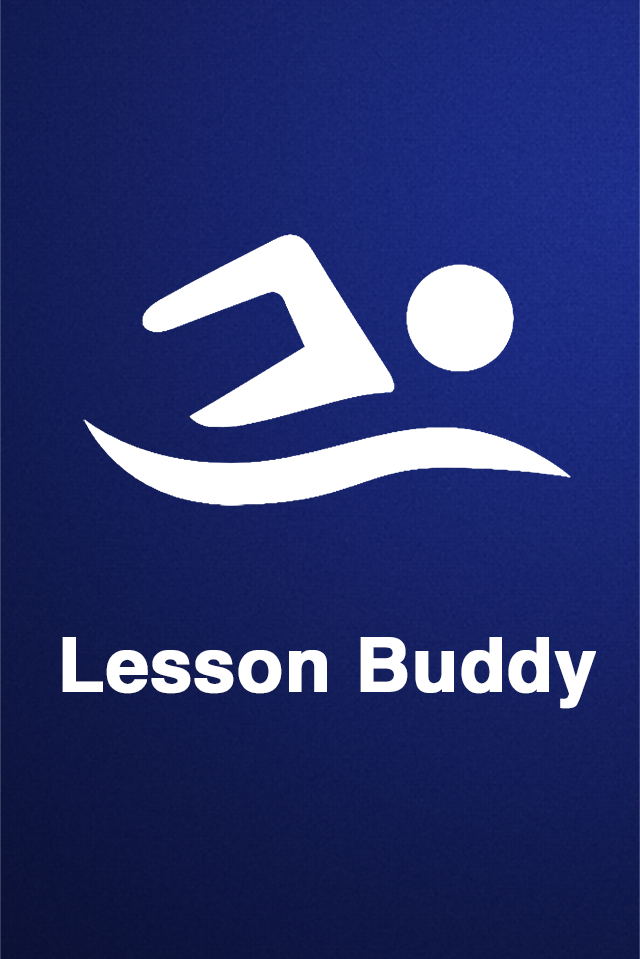
<style>
.page{position:relative;width:640px;height:959px}
.page>*{position:absolute;margin:0}
.t1{font:75.1px "Helvetica-Bold";color:#ffffff;font-weight:bold}
</style>
<div class="page">
<p class="t1" style="left:62px;top:637px;width:534px;height:72px">Lesson Buddy</p>
</div>
